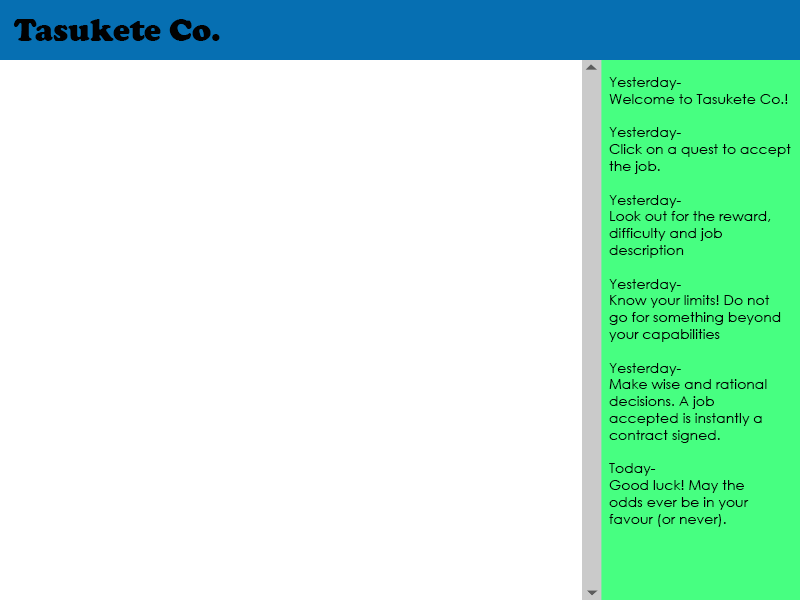
<style>
.page{position:relative;width:800px;height:600px;background:#ffffff}
.page>*{position:absolute;margin:0}
.t1{font:32px "CooperBlack";color:#010101}
.t2{font:14px "CenturyGothic";color:#030303}
</style>
<div class="page">
<p class="t1" style="left:13px;top:19px;width:207px;height:22px">Tasukete Co.</p>
<p class="t2" style="left:609px;top:77px;width:182px;height:450px">Yesterday-<br>Welcome to Tasukete Co.!<br><br>Yesterday-<br>Click on a quest to accept<br>the job.<br><br>Yesterday-<br>Look out for the reward, <br>difficulty and job <br>description<br><br>Yesterday-<br>Know your limits! Do not <br>go for something beyond <br>your capabilities<br><br>Yesterday-<br>Make wise and rational<br>decisions. A job <br>accepted is instantly a<br>contract signed.<br><br>Today-<br>Good luck! May the <br>odds ever be in your <br>favour (or never).</p>
</div>
